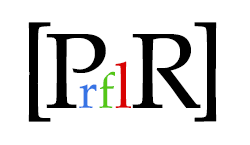
<style>
.page{position:relative;width:250px;height:145px;background:#ffffff}
.page>*{position:absolute;margin:0}
.t1{font:106.6px "Palatino-Roman";color:#000000}
.t2{font:49.8px "Palatino-Roman";color:#3774e5}
.t3{font:49.8px "Palatino-Roman";color:#54c616}
.t4{font:64px "Palatino-Roman";color:#d90202}
</style>
<div class="page">
<p class="t1" style="left:28px;top:22px;width:23px;height:100px">[</p>
<p class="t1" style="left:194px;top:22px;width:23px;height:100px">]</p>
<p class="t1" style="left:46px;top:34px;width:60px;height:74px">P</p>
<p class="t1" style="left:132px;top:34px;width:69px;height:74px">R</p>
<p class="t2" style="left:79px;top:61px;width:52px;height:47px"><span class="t1"><br></span>r<span class="t3">f</span><span class="t4">l</span></p>
</div>
